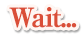
<style>
.page{position:relative;width:84px;height:34px;background:#ffffff}
.page>*{position:absolute;margin:0}
.t1{font:26px "RyuminPro-ExBold";letter-spacing:-0.08em;color:#da4e37;font-weight:bold}
</style>
<div class="page">
<p class="t1" style="left:9px;top:7px;width:68px;height:21px">Wait...</p>
</div>
